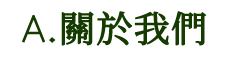
<style>
.page{position:relative;width:227px;height:57px;background:#ffffff}
.page>*{position:absolute;margin:0}
.t1{font:36px "SourceHanSerifTC-Regular";letter-spacing:0.01em;color:#153b01;font-weight:bold}
.t2{font:36px "AMGDT_IV50";letter-spacing:0.01em;color:#153b01}
</style>
<div class="page">
<p class="t1" style="left:22px;top:11px;width:185px;height:35px"><span class="t2">A.</span>關於我們</p>
</div>
